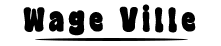
<style>
.page{position:relative;width:221px;height:46px;background:#ffffff}
.page>*{position:absolute;margin:0}
.t1{font:30.2px "SuperSenior";letter-spacing:0.2em;color:#000000;font-weight:bold;scale:0.79 1}
</style>
<div class="page">
<p class="t1" style="left:23px;top:4px;width:173px;height:32px">Wage Ville</p>
</div>
